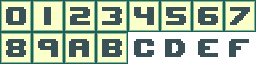
<style>
.page{position:relative;width:256px;height:64px;background:#fbffca}
.page>*{position:absolute;margin:0}
.t1{font:36px "UpheavalTT-BRK-";color:#395157;text-transform:uppercase}
</style>
<div class="page">
<p class="t1" style="left:6px;top:7px;width:20px;height:18px">0</p>
<p class="t1" style="left:70px;top:7px;width:20px;height:18px">2</p>
<p class="t1" style="left:102px;top:7px;width:20px;height:18px">3</p>
<p class="t1" style="left:134px;top:7px;width:20px;height:18px">4</p>
<p class="t1" style="left:166px;top:7px;width:20px;height:18px">5</p>
<p class="t1" style="left:198px;top:7px;width:20px;height:18px">6</p>
<p class="t1" style="left:230px;top:7px;width:20px;height:18px">7</p>
<p class="t1" style="left:6px;top:39px;width:20px;height:18px">8</p>
<p class="t1" style="left:38px;top:39px;width:20px;height:18px">9</p>
<p class="t1" style="left:69px;top:39px;width:20px;height:18px">a</p>
<p class="t1" style="left:102px;top:39px;width:20px;height:18px">b</p>
<p class="t1" style="left:134px;top:39px;width:20px;height:18px">c</p>
<p class="t1" style="left:165px;top:39px;width:20px;height:18px">d</p>
<p class="t1" style="left:198px;top:39px;width:20px;height:18px">e</p>
<p class="t1" style="left:229px;top:39px;width:20px;height:18px">f</p>
</div>
